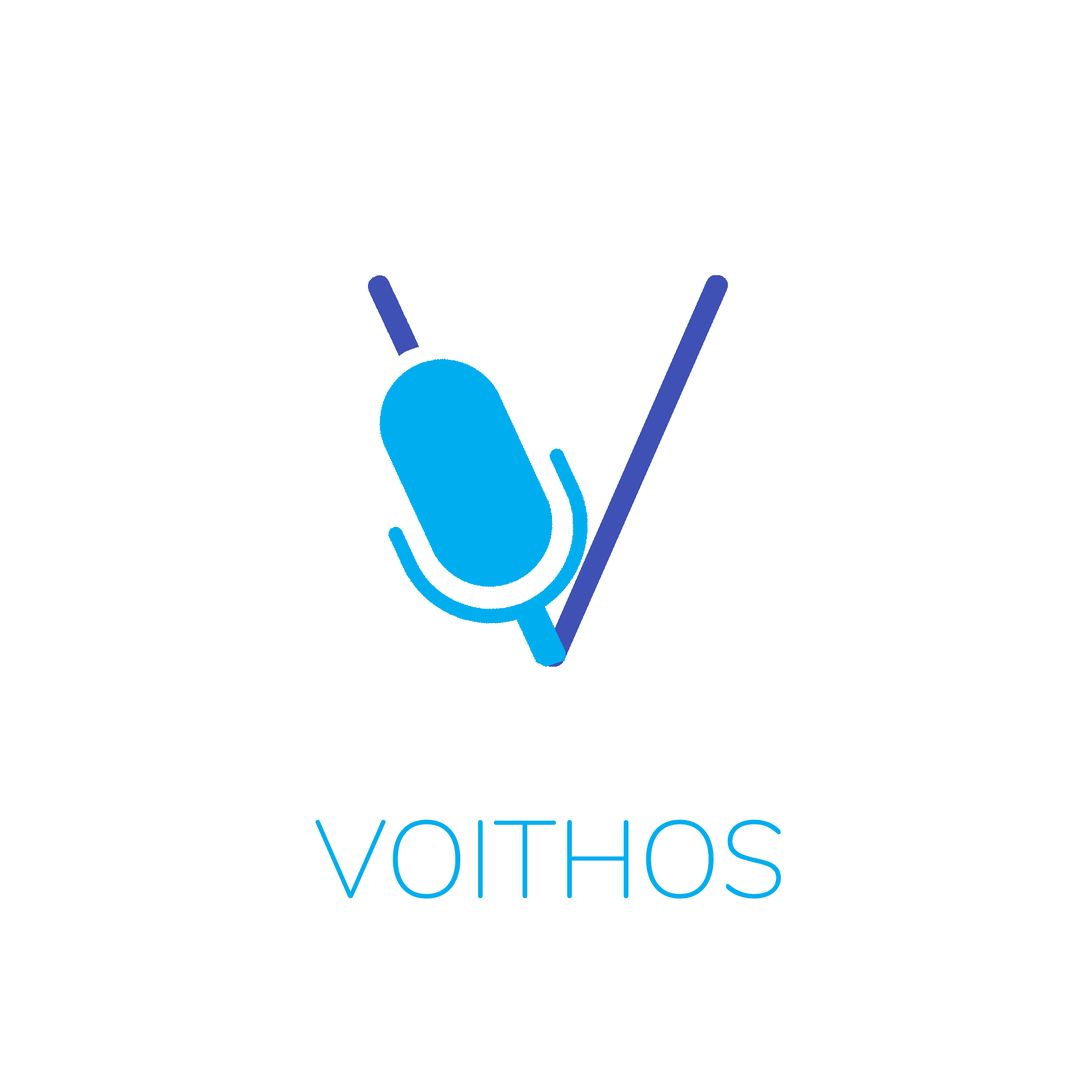
<style>
.page{position:relative;width:1092px;height:1092px;background:#ffffff}
.page>*{position:absolute;margin:0}
.t1{font:109.2px "Nunito-ExtraLight";color:#00aeef}
</style>
<div class="page">
<p class="t1" style="left:315px;top:820px;width:466px;height:79px">VOITHOS</p>
</div>
